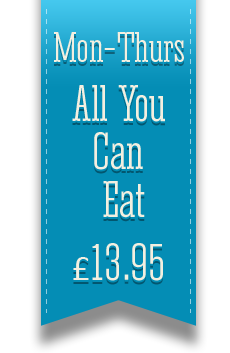
<style>
.page{position:relative;width:230px;height:353px;background:#048db5}
.page>*{position:absolute;margin:0}
.t1{font:40px "Corki-Tuscan"}
.t2{font:40px "Corki-Tuscan";color:#f3efe0}
.t3{font:48px/48px "Corki-Tuscan"}
.t4{font:48px/48px "Corki-Tuscan";color:#f3efe0}
.t5{font:48px "Corki-Regular"}
.t6{font:36px "Calibri"}
.t7{font:48px "Corki-Regular";color:#f3efe0}
.t8{font:36px "Calibri";color:#f3efe0}
</style>
<div class="page">
<p class="t1" style="left:54px;top:34px;width:130px;height:30px">Mon-Thurs</p>
<p class="t2" style="left:54px;top:32px;width:130px;height:30px">Mon-Thurs</p>
<p class="t3" style="left:72px;top:87px;width:93px;height:133px;text-align:center">All You <br>Can <br>Eat</p>
<p class="t4" style="left:72px;top:85px;width:93px;height:133px;text-align:center">All You <br>Can <br>Eat</p>
<p class="t5" style="left:73px;top:245px;width:90px;height:38px"><span class="t6">£</span>13.95</p>
<p class="t7" style="left:73px;top:243px;width:90px;height:38px"><span class="t8">£</span>13.95</p>
</div>
